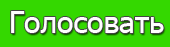
<style>
.page{position:relative;width:170px;height:47px;background:#34d800}
.page>*{position:absolute;margin:0}
.t1{font:30px "Tahoma";color:#ffffff}
</style>
<div class="page">
<p class="t1" style="left:11px;top:11px;width:153px;height:22px">Голосовать</p>
</div>
